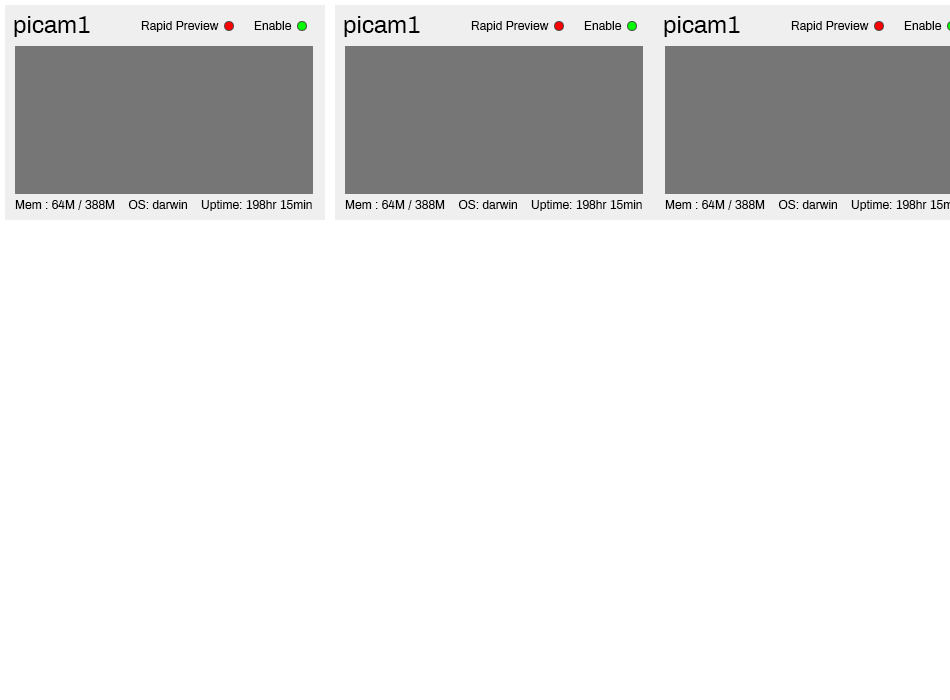
<style>
.page{position:relative;width:950px;height:700px;background:#ffffff}
.page>*{position:absolute;margin:0}
.t1{font:24px "Archivo-Regular";color:#000000}
.t2{font:12px "Archivo-Regular";color:#000000}
</style>
<div class="page">
<p class="t1" style="left:14px;top:16px;width:76px;height:21px">picam1</p>
<p class="t1" style="left:344px;top:16px;width:76px;height:21px">picam1</p>
<p class="t1" style="left:664px;top:16px;width:76px;height:21px">picam1</p>
<p class="t2" style="left:141px;top:21px;width:78px;height:11px">Rapid Preview</p>
<p class="t2" style="left:254px;top:21px;width:38px;height:9px">Enable</p>
<p class="t2" style="left:471px;top:21px;width:78px;height:11px">Rapid Preview</p>
<p class="t2" style="left:584px;top:21px;width:38px;height:9px">Enable</p>
<p class="t2" style="left:791px;top:21px;width:78px;height:11px">Rapid Preview</p>
<p class="t2" style="left:904px;top:21px;width:38px;height:9px">Enable</p>
<p class="t2" style="left:15px;top:200px;width:297px;height:11px">Mem : 64M / 388M    OS: darwin    Uptime: 198hr 15min</p>
<p class="t2" style="left:345px;top:200px;width:297px;height:11px">Mem : 64M / 388M    OS: darwin    Uptime: 198hr 15min</p>
</div>
